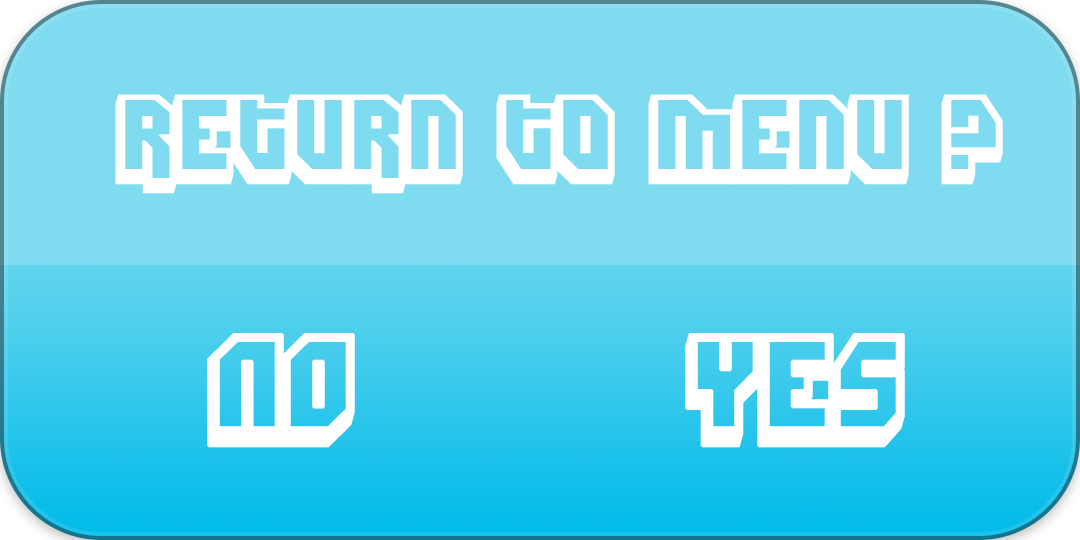
<style>
.page{position:relative;width:1080px;height:540px;background:#7fdbef}
.page>*{position:absolute;margin:0}
.t1{font:100px "DimitriSwank";letter-spacing:0.005em;color:#ffffff;font-weight:bold}
.t2{font:125px "DimitriSwank";letter-spacing:0.005em;color:#ffffff;font-weight:bold}
</style>
<div class="page">
<p class="t1" style="left:115px;top:94px;width:888px;height:100px">Return to Menu ?</p>
<p class="t2" style="left:207px;top:333px;width:148px;height:115px">NO</p>
<p class="t2" style="left:685px;top:333px;width:220px;height:115px">YES</p>
</div>
